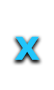
<style>
.page{position:relative;width:54px;height:90px;background:#ffffff}
.page>*{position:absolute;margin:0}
.t1{font:44px "Sarala-Bold";letter-spacing:0.005em;color:#21c6fc}
</style>
<div class="page">
<p class="t1" style="left:15px;top:36px;width:25px;height:24px">x</p>
</div>
